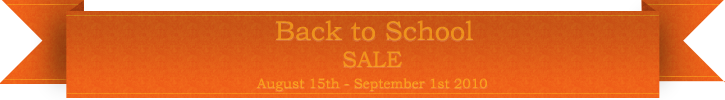
<style>
.page{position:relative;width:725px;height:100px}
.page>*{position:absolute;margin:0}
.t1{font:27.2px "BookmanOldStyle";color:#fa9b19}
.t2{font:22.6px "BookmanOldStyle";color:#fa9b19}
.t3{font:13.6px "BookmanOldStyle";color:#fa9b19}
</style>
<div class="page">
<p class="t1" style="left:276px;top:20px;width:197px;height:21px;opacity:0.68">Back to School</p>
<p class="t2" style="left:343px;top:51px;width:59px;height:17px;opacity:0.68">SALE</p>
<p class="t3" style="left:257px;top:78px;width:230px;height:14px;opacity:0.8">August 15th - September 1st 2010</p>
</div>
